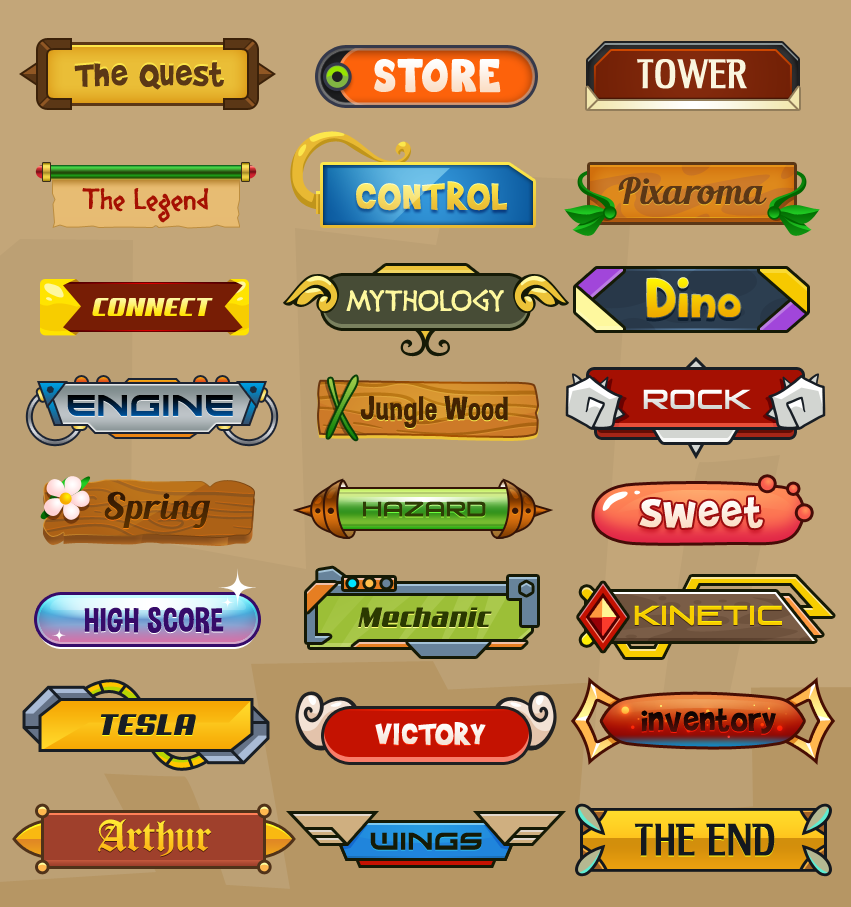
<style>
.page{position:relative;width:851px;height:907px;background:#c3a679}
.page>*{position:absolute;margin:0}
.t1{font:38px "BradyBunchRemastered";letter-spacing:0.025em;color:#5b3716}
.t2{font:28px "Big_Bottom_Cartoon";letter-spacing:0.025em}
.t3{font:38px "KingRichard-Regular";letter-spacing:0.025em;color:#faf6df}
.t4{font:45.2px "BradyBunchRemastered";letter-spacing:0.025em}
.t5{font:36px "BlendaScript";letter-spacing:0.025em;color:#5b3716}
.t6{font:26px "Diogenes";letter-spacing:0.025em;color:#a51002}
.t7{font:33.9px "Big_Bottom_Cartoon";letter-spacing:0.025em}
.t8{font:26px "Diogenes";letter-spacing:0.025em;color:#fef89e}
.t9{font:26px "Aero";letter-spacing:0.025em}
.t10{font:26px "VenusRising-Regular";letter-spacing:0.025em;color:#eaebea}
.t11{font:30px "Xirod-Regular";letter-spacing:0.025em}
.t12{font:33.9px "DimboRegular";letter-spacing:0.025em;color:#442302}
.t13{font:36px "BlendaScript";letter-spacing:0.025em;color:#480e03}
.t14{font:48px "BradyBunchRemastered";letter-spacing:0.025em;color:#fdede0}
.t15{font:19.8px "VenusRising-Regular";letter-spacing:0.025em;color:#2d3d05}
.t16{font:26px "VenusRising-Regular";letter-spacing:0.025em;color:#f7cd00}
.t17{font:33.9px "DimboRegular";letter-spacing:0.025em;color:#360b69}
.t18{font:28px "Aero";letter-spacing:0.025em;color:#2b3901}
.t19{font:36px "BradyBunchRemastered";letter-spacing:0.025em}
.t20{font:30px "Aero";letter-spacing:0.025em;color:#181e25}
.t21{font:36px "BradyBunchRemastered";letter-spacing:0.025em;color:#ffffff}
.t22{font:48px "OldLondonAlternate";color:#fdcb22}
.t23{font:24px "Xirod-Regular";letter-spacing:0.025em;color:#151a06}
.t24{font:42px "KingRichard-Regular";letter-spacing:0.025em;color:#14181e}
</style>
<div class="page">
<p class="t1" style="left:74px;top:62px;width:150px;height:28px">The Quest</p>
<p class="t2" style="left:374px;top:58px;width:127px;height:35px">STORE</p>
<p class="t3" style="left:637px;top:59px;width:110px;height:30px">TOWER</p>
<p class="t4" style="left:356px;top:181px;width:151px;height:30px">CONTROL</p>
<p class="t5" style="left:618px;top:176px;width:149px;height:29px">Pixaroma</p>
<p class="t6" style="left:82px;top:188px;width:127px;height:35px">The Legend</p>
<p class="t7" style="left:646px;top:277px;width:96px;height:42px">Dino</p>
<p class="t8" style="left:346px;top:289px;width:158px;height:23px">MYTHOLOGY</p>
<p class="t9" style="left:92px;top:298px;width:121px;height:18px">CONNECT</p>
<p class="t10" style="left:643px;top:389px;width:109px;height:20px">ROCK</p>
<p class="t11" style="left:67px;top:395px;width:166px;height:21px">ENGINE</p>
<p class="t12" style="left:360px;top:395px;width:148px;height:33px">Jungle Wood</p>
<p class="t13" style="left:104px;top:491px;width:107px;height:37px">Spring</p>
<p class="t14" style="left:639px;top:497px;width:124px;height:32px">Sweet</p>
<p class="t15" style="left:363px;top:501px;width:123px;height:16px">hazard</p>
<p class="t16" style="left:634px;top:605px;width:148px;height:21px">KINETIC</p>
<p class="t17" style="left:84px;top:607px;width:140px;height:27px">HIGH SCORE</p>
<p class="t18" style="left:358px;top:607px;width:134px;height:20px">Mechanic</p>
<p class="t19" style="left:641px;top:708px;width:135px;height:26px">inventory</p>
<p class="t20" style="left:101px;top:714px;width:95px;height:21px">TESLA</p>
<p class="t21" style="left:375px;top:722px;width:111px;height:23px">VICTORY</p>
<p class="t22" style="left:98px;top:819px;width:114px;height:38px">Arthur</p>
<p class="t23" style="left:370px;top:832px;width:112px;height:18px">wings</p>
<p class="t24" style="left:634px;top:823px;width:141px;height:33px">THE END</p>
</div>
